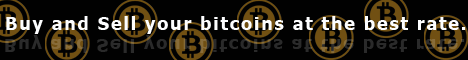
<style>
.page{position:relative;width:468px;height:60px;background:#010101}
.page>*{position:absolute;margin:0}
.t1{font:18px "Tahoma-Bold";letter-spacing:0.1em;color:#fdfeff}
.t2{font:18px "Tahoma-Bold";letter-spacing:0.1em;color:#2a2a2a}
</style>
<div class="page">
<p class="t1" style="left:6px;top:16px;width:460px;height:18px">Buy and Sell your bitcoins at the best rate.</p>
<p class="t2" style="left:5px;top:35px;width:460px;height:18px">Buy and Sell your bitcoins at the best rate.</p>
</div>
